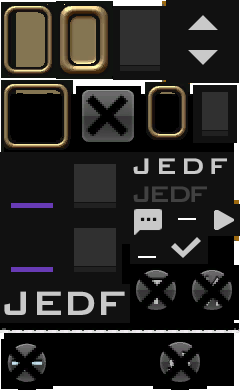
<style>
.page{position:relative;width:240px;height:392px;background:#111111}
.page>*{position:absolute;margin:0}
.t1{font:30px "BankGothicBold";letter-spacing:-0.05em;color:#c9c9c9}
.t2{font:30px "BankGothicBold";letter-spacing:-0.05em;color:#414141}
.t3{font:45px "BankGothicBold";letter-spacing:-0.05em;color:#c9c9c9}
</style>
<div class="page">
<p class="t1" style="left:133px;top:158px;width:16px;height:16px">J</p>
<p class="t1" style="left:159px;top:158px;width:16px;height:16px">E</p>
<p class="t1" style="left:184px;top:158px;width:19px;height:16px">D</p>
<p class="t1" style="left:211px;top:158px;width:16px;height:16px">F</p>
<p class="t2" style="left:133px;top:186px;width:16px;height:16px">J</p>
<p class="t2" style="left:152px;top:186px;width:16px;height:16px">E</p>
<p class="t2" style="left:171px;top:186px;width:19px;height:16px">D</p>
<p class="t2" style="left:191px;top:186px;width:16px;height:16px">F</p>
<p class="t3" style="left:4px;top:291px;width:22px;height:24px">J</p>
<p class="t3" style="left:37px;top:291px;width:24px;height:24px">E</p>
<p class="t3" style="left:101px;top:291px;width:24px;height:24px">F</p>
</div>
